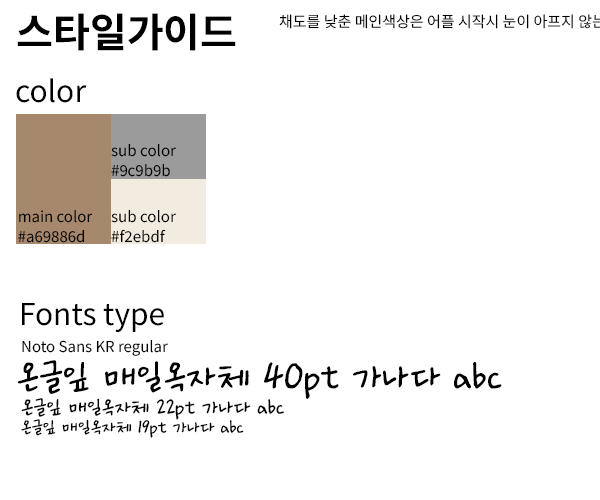
<style>
.page{position:relative;width:600px;height:500px;background:#ffffff}
.page>*{position:absolute;margin:0}
.t1{font:40px "NotoSansKR-Bold";color:#000000}
.t2{font:30px "NotoSansKR-Regular";color:#000000}
.t3{font:15px/20px "NotoSansKR-Regular";color:#000000}
.t4{font:15px/19.9px "NotoSansKR-Regular";color:#000000}
.t5{font:30.1px "NotoSansKR-Regular";color:#000000}
.t6{font:15px "NotoSansKR-Regular";color:#000000}
.t7{font:40.1px "Ownglyph_Dailyokja-Rg";color:#000000}
.t8{font:22.1px "Ownglyph_Dailyokja-Rg";color:#000000}
.t9{font:19.1px "Ownglyph_Dailyokja-Rg";color:#000000}
</style>
<div class="page">
<p class="t1" style="left:17px;top:13px;width:219px;height:38px">스타일가이드</p>
<p class="t2" style="left:16px;top:78px;width:71px;height:25px">color</p>
<p class="t3" style="left:111px;top:143px;width:65px;height:34px">sub color<br>#9c9b9b</p>
<p class="t4" style="left:111px;top:209px;width:65px;height:34px">sub color<br>#f2ebdf</p>
<p class="t3" style="left:18px;top:210px;width:74px;height:33px">main color<br>#a69886d</p>
<p class="t5" style="left:22px;top:303px;width:142px;height:29px">Fonts type</p>
<p class="t6" style="left:22px;top:339px;width:146px;height:17px">Noto Sans KR regular</p>
<p class="t7" style="left:18px;top:360px;width:484px;height:39px">온글잎 매일옥자체 40pt 가나다 abc</p>
<p class="t8" style="left:21px;top:398px;width:263px;height:22px">온글잎 매일옥자체 22pt 가나다 abc</p>
<p class="t9" style="left:21px;top:419px;width:223px;height:19px">온글잎 매일옥자체 19pt 가나다 abc</p>
</div>
